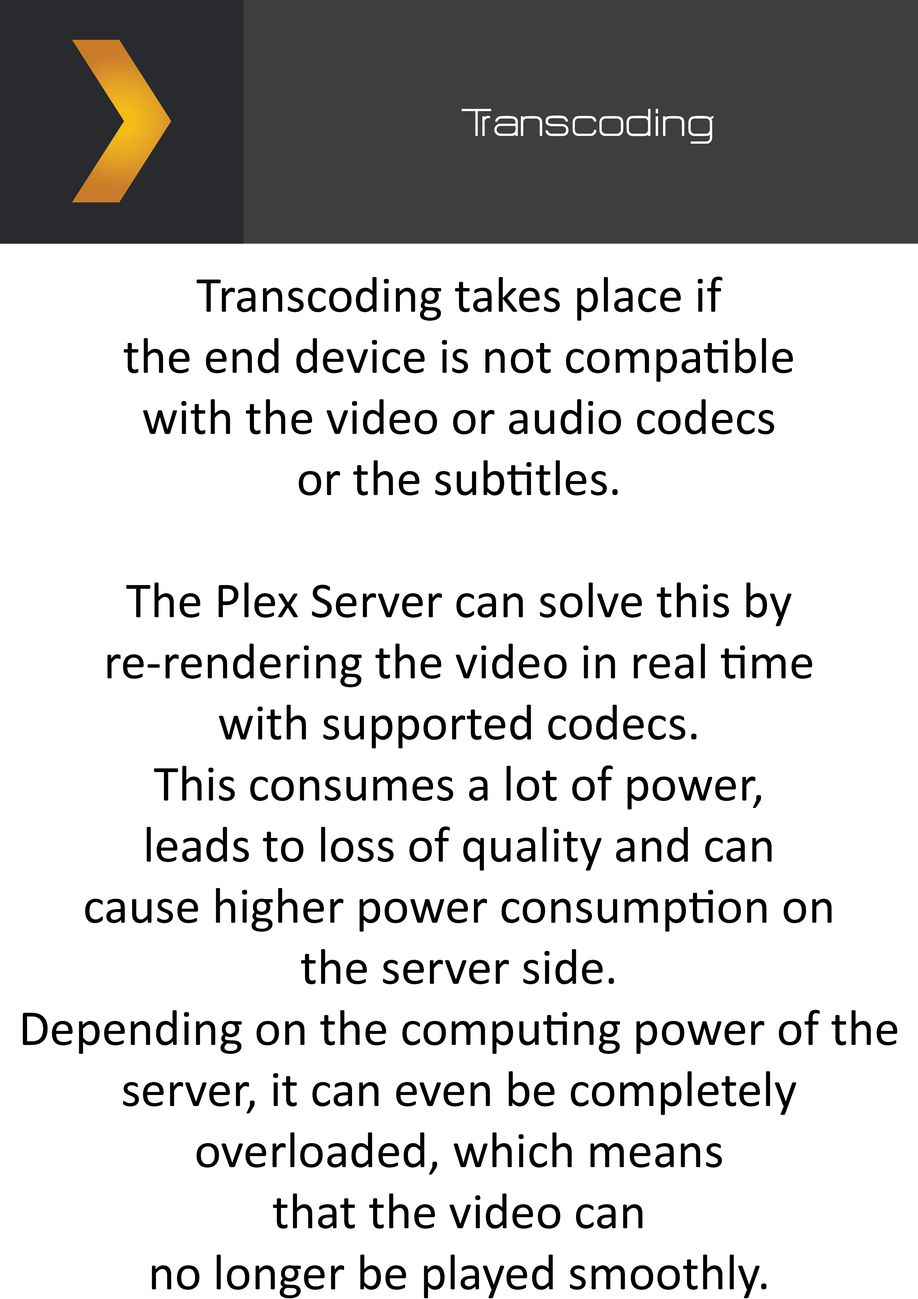
<style>
.page{position:relative;width:918px;height:1299px;background:#ffffff}
.page>*{position:absolute;margin:0}
.t1{font:47.8px "HURTMOLDPersonalUse-Regular";color:#ffffff}
.t2{font:50.9px "Calibri";color:#000000}
</style>
<div class="page">
<p class="t1" style="left:462px;top:109px;width:252px;height:35px">Transcoding</p>
<p class="t2" style="left:23px;top:277px;width:875px;height:1021px;text-align:center">Transcoding takes place if<br>the end device is not compatible<br>with the video or audio codecs<br>or the subtitles.<br><br>The Plex Server can solve this by<br>re-rendering the video in real time<br>with supported codecs.<br>This consumes a lot of power,<br>leads to loss of quality and can<br>cause higher power consumption on<br>the server side.<br>Depending on the computing power of the<br>server, it can even be completely<br>overloaded, which means<br>that the video can<br>no longer be played smoothly.</p>
</div>
